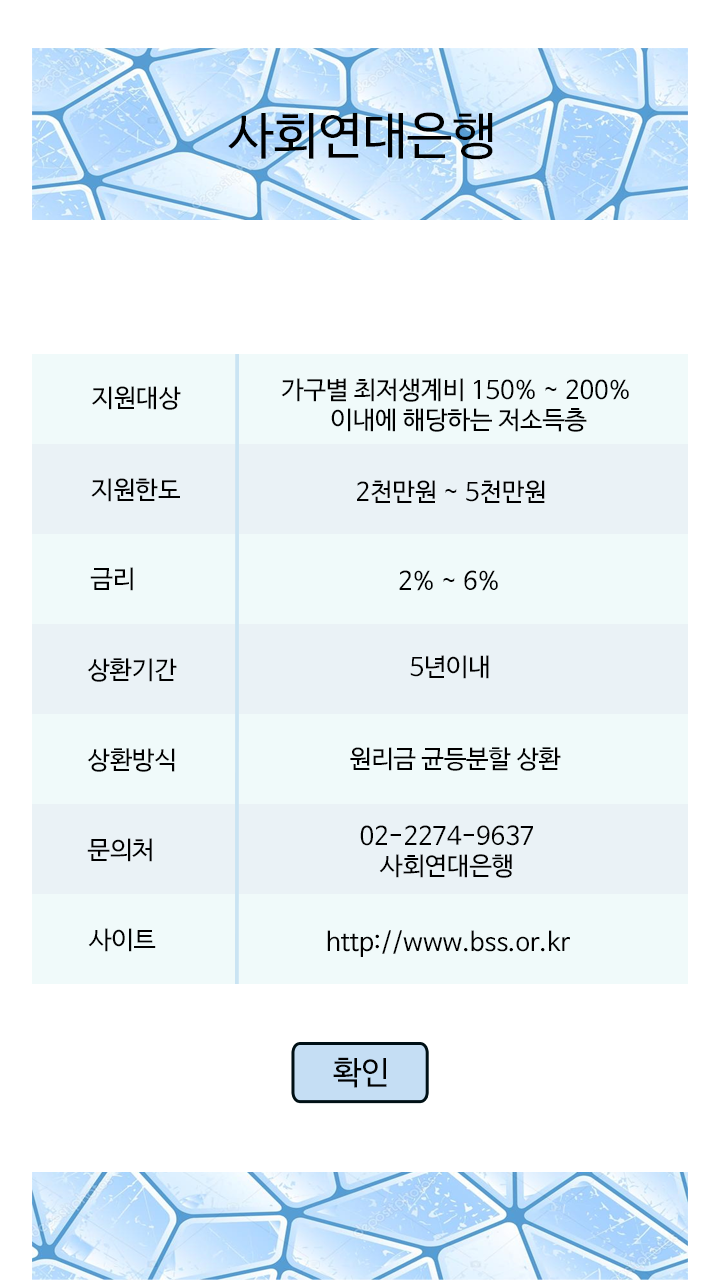
<style>
.page{position:relative;width:720px;height:1280px;background:#ffffff}
.page>*{position:absolute;margin:0}
.t1{font:50px "NanumBarunGothic";color:#000000}
.t2{font:25px "NanumBarunGothic";color:#000000}
.t3{font:25px/30px "NanumBarunGothic";color:#000000}
.t4{font:32px "NanumBarunGothic";color:#000000}
</style>
<div class="page">
<p class="t1" style="left:228px;top:112px;width:265px;height:48px">사회연대은행</p>
<p class="t2" style="left:92px;top:386px;width:89px;height:24px">지원대상</p>
<p class="t3" style="left:281px;top:378px;width:348px;height:54px;text-align:center">가구별 최저생계비 150% ~ 200% <br>이내에 해당하는 저소득층</p>
<p class="t2" style="left:91px;top:478px;width:89px;height:24px">지원한도</p>
<p class="t2" style="left:357px;top:480px;width:188px;height:23px">2천만원 ~ 5천만원</p>
<p class="t2" style="left:90px;top:567px;width:43px;height:24px">금리</p>
<p class="t2" style="left:399px;top:570px;width:99px;height:21px">2% ~ 6%</p>
<p class="t2" style="left:87px;top:658px;width:90px;height:24px">상환기간</p>
<p class="t2" style="left:410px;top:655px;width:79px;height:24px">5년이내</p>
<p class="t2" style="left:87px;top:748px;width:88px;height:24px">상환방식</p>
<p class="t2" style="left:350px;top:747px;width:211px;height:24px">원리금 균등분할 상환</p>
<p class="t3" style="left:360px;top:825px;width:173px;height:53px;text-align:center">02-2274-9637<br>사회연대은행</p>
<p class="t2" style="left:87px;top:838px;width:65px;height:24px">문의처</p>
<p class="t2" style="left:88px;top:928px;width:68px;height:24px">사이트</p>
<p class="t2" style="left:327px;top:930px;width:243px;height:27px">http://www.bss.or.kr</p>
<p class="t4" style="left:333px;top:1057px;width:54px;height:31px">확인</p>
</div>
